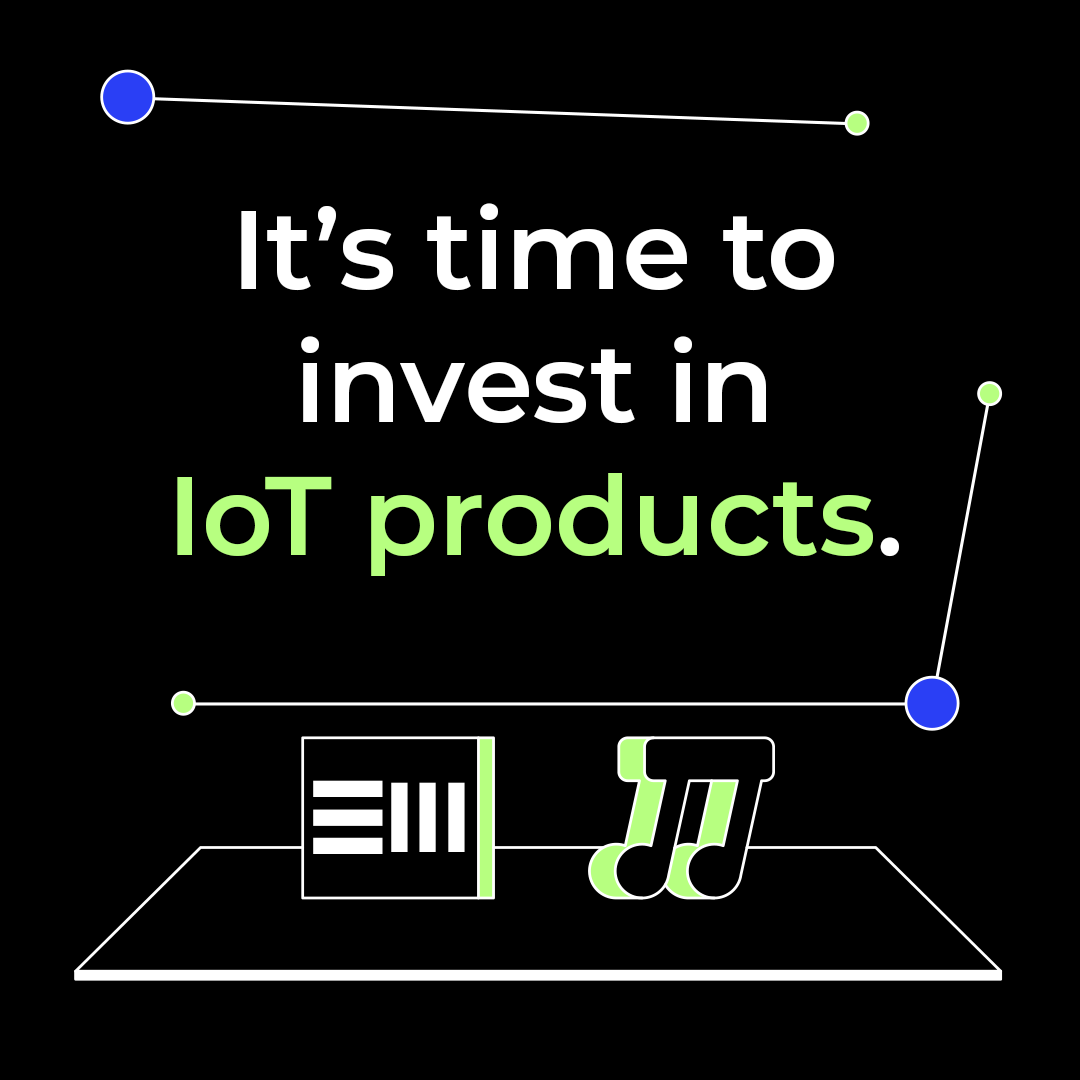
<style>
.page{position:relative;width:1080px;height:1080px;background:#000000}
.page>*{position:absolute;margin:0}
.t1{font:110.8px "Montserrat-SemiBold";color:#ffffff}
.t2{font:110.8px "Montserrat-SemiBold";color:#b7ff80}
</style>
<div class="page">
<p class="t1" style="left:177px;top:203px;width:722px;height:373px;text-align:center">It’s time to<br>invest in<br><span class="t2">IoT products</span>.</p>
</div>
